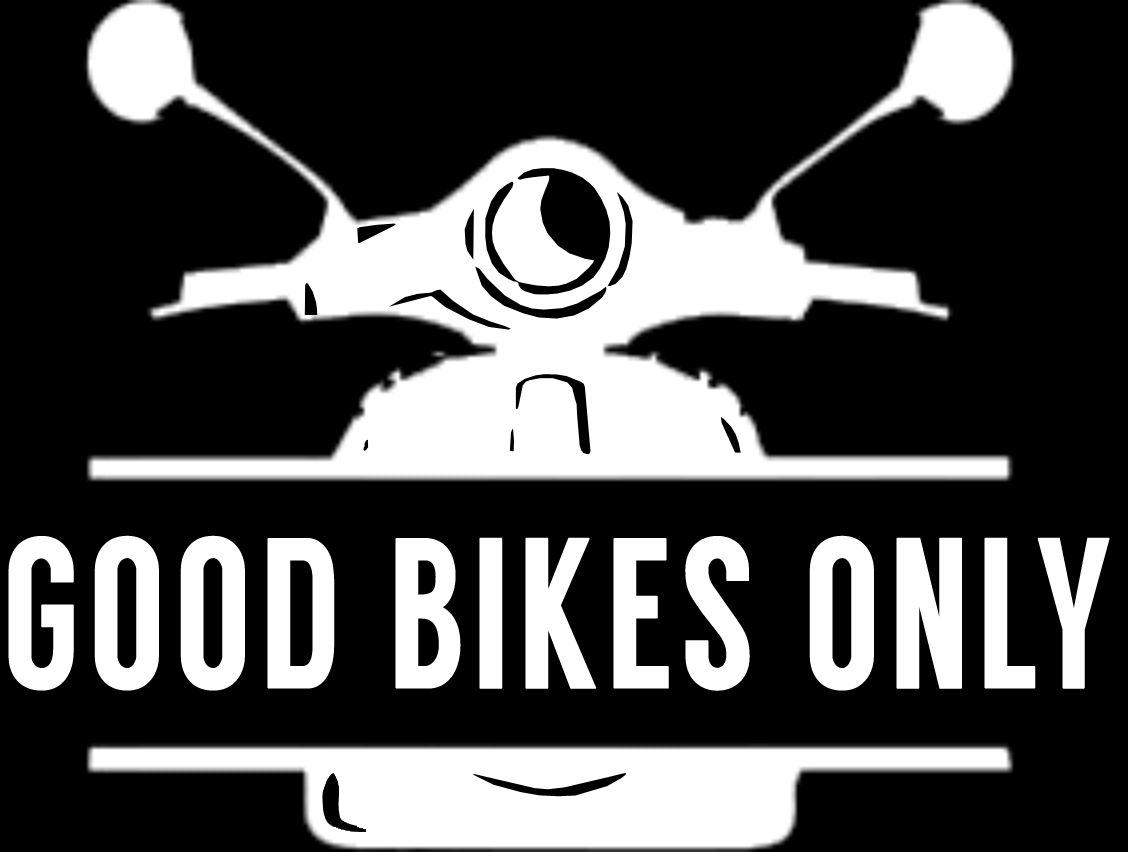
<style>
.page{position:relative;width:1128px;height:852px;background:#000000}
.page>*{position:absolute;margin:0}
.t1{font:213.7px "Langdon";letter-spacing:0.02em;color:#ffffff;font-weight:bold;scale:0.8 1}
</style>
<div class="page">
<p class="t1" style="left:8px;top:535px;width:1102px;height:156px">GOOD BIKES ONLY</p>
</div>
